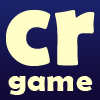
<style>
.page{position:relative;width:100px;height:100px;background:#fffec7}
.page>*{position:absolute;margin:0}
.t1{font:114.5px "BerlinSansFBDemi-Bold";color:#fffec7}
.t2{font:33.4px "BerlinSansFBDemi-Bold";color:#fffec7}
</style>
<div class="page">
<p class="t1" style="left:6px;top:10px;width:89px;height:56px">cr</p>
<p class="t2" style="left:8px;top:76px;width:85px;height:19px">game</p>
</div>
